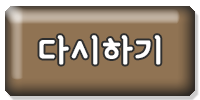
<style>
.page{position:relative;width:200px;height:100px;background:#907353}
.page>*{position:absolute;margin:0}
.t1{font:50px "YanoljaYacheR";color:#ffffff}
</style>
<div class="page">
<p class="t1" style="left:39px;top:35px;width:122px;height:30px">다시하기</p>
</div>
